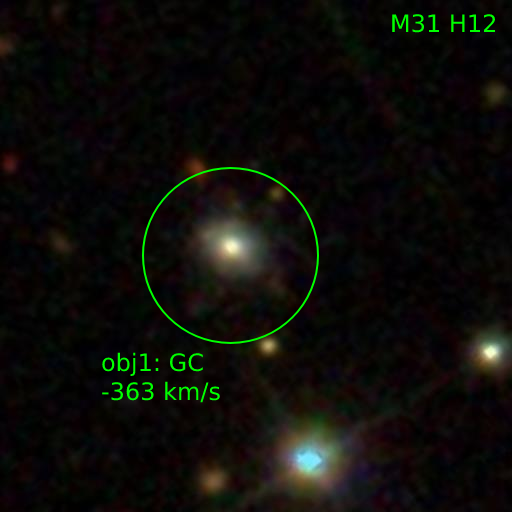
<style>
.page{position:relative;width:512px;height:512px}
.page>*{position:absolute;margin:0}
.t1{font:24px "DejaVuSans";color:#00ff00}
</style>
<div class="page">
<p class="t1" style="left:392px;top:14px;width:104px;height:19px">M31 H12</p>
<p class="t1" style="left:102px;top:352px;width:118px;height:51px">obj1: GC<br>-363 km/s</p>
</div>
